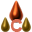
<style>
.page{position:relative;width:32px;height:32px;background:#ffffff}
.page>*{position:absolute;margin:0}
.t1{font:18px "Arial-BoldMT";color:#d66c53}
</style>
<div class="page">
<p class="t1" style="left:10px;top:19px;width:12px;height:13px">C</p>
</div>
